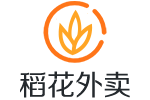
<style>
.page{position:relative;width:150px;height:100px;background:#ffffff}
.page>*{position:absolute;margin:0}
.t1{font:28px "FZZHJW--GB1-0";color:#24292d}
</style>
<div class="page">
<p class="t1" style="left:20px;top:71px;width:110px;height:27px">稻花外卖</p>
</div>
